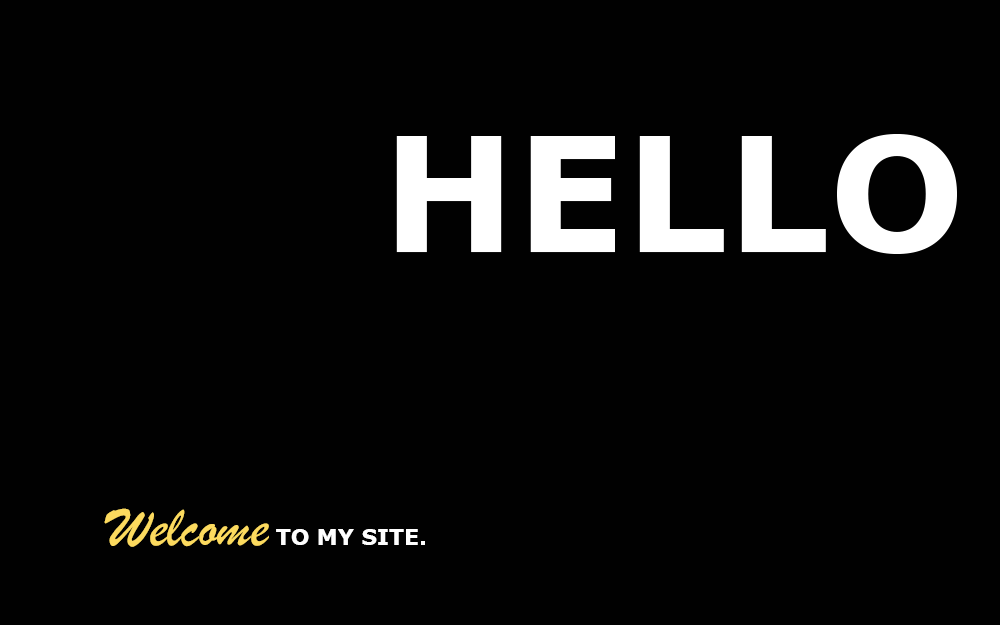
<style>
.page{position:relative;width:1000px;height:625px;background:#010101}
.page>*{position:absolute;margin:0}
.t1{font:160px "Verdana-Bold";color:#ffffff}
.t2{font:22px "Verdana-Bold"}
.t3{font:60px "BrushScriptMT"}
</style>
<div class="page">
<p class="t1" style="left:396px;top:134px;width:561px;height:120px">HELLO</p>
<p class="t2" style="left:104px;top:508px;width:321px;height:39px"><span class="t3">Welcome </span>TO MY SITE.</p>
<p class="t2" style="left:104px;top:508px;width:321px;height:39px"><span class="t3">Welcome</span> TO MY SITE.</p>
</div>
